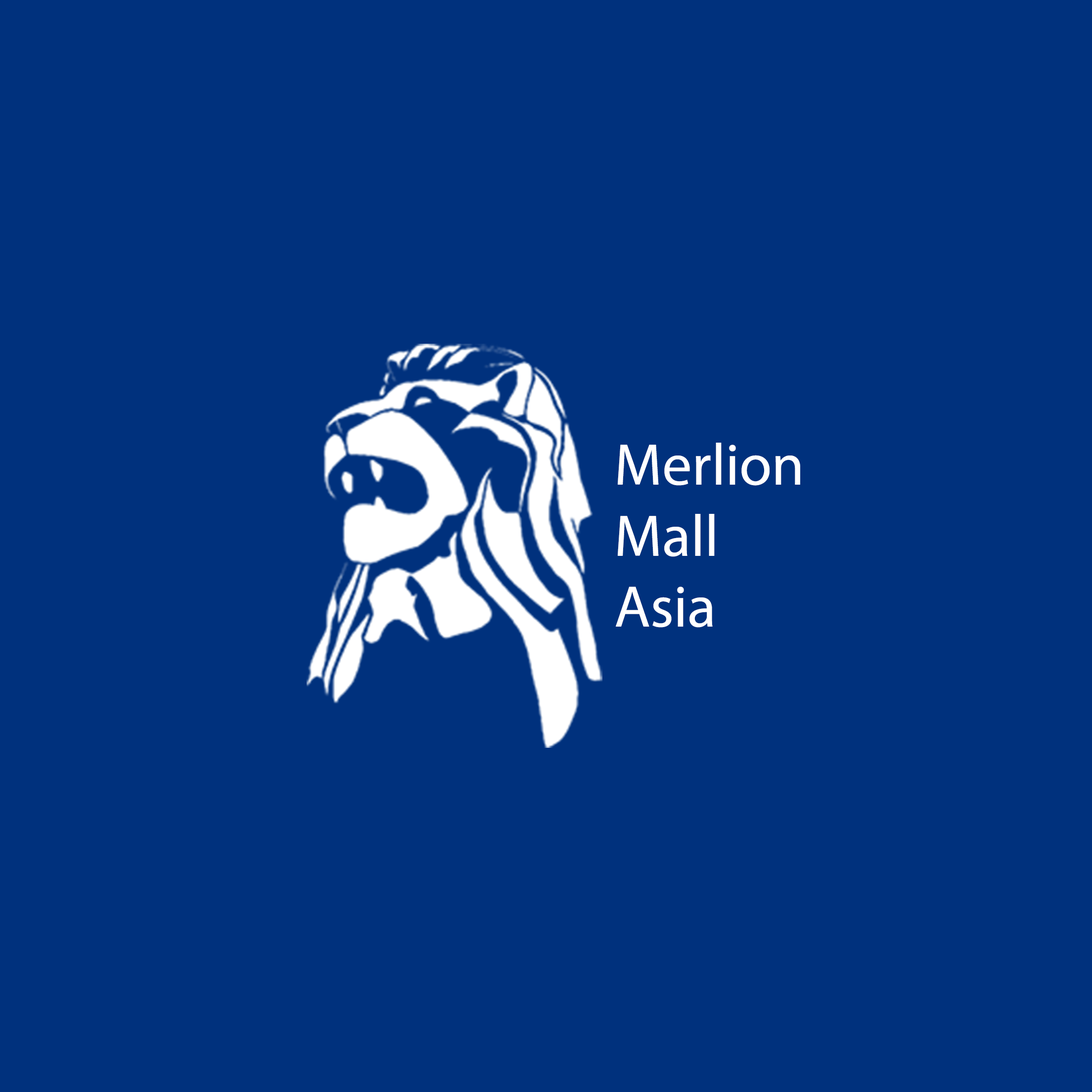
<style>
.page{position:relative;width:1092px;height:1092px;background:#00317d}
.page>*{position:absolute;margin:0}
.t1{font:59.1px "MyriadPro-Regular";color:#ffffff}
</style>
<div class="page">
<p class="t1" style="left:616px;top:443px;width:184px;height:185px">Merlion<br>Mall<br>Asia</p>
</div>
